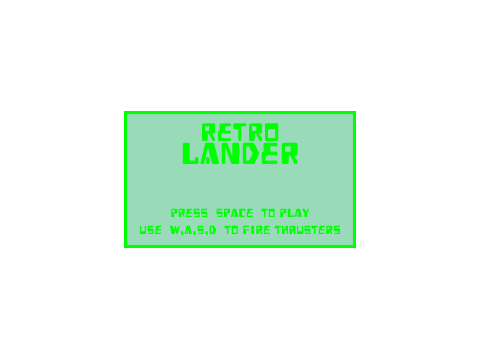
<style>
.page{position:relative;width:480px;height:360px;background:#ffffff}
.page>*{position:absolute;margin:0}
.t1{font:14px "HeavyData";color:#00ff00}
.t2{font:30px/23px "HeavyData";color:#00ff00}
.t3{font:36px/23px "HeavyData";color:#00ff00}
</style>
<div class="page">
<p class="t1" style="left:140px;top:123px;width:200px;height:113px;text-align:center"><span class="t2">Retro<br></span><span class="t3">Lander<br><br></span>Press [SPACE] to Play<br>Use [W,A,S,D] to Fire Thrusters</p>
</div>
